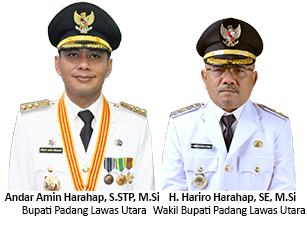
<style>
.page{position:relative;width:307px;height:236px;background:#ffffff}
.page>*{position:absolute;margin:0}
.t1{font:12px "Calibri-Bold";letter-spacing:-0.025em;color:#000000}
.t2{font:12px "Calibri";letter-spacing:-0.025em;color:#000000}
</style>
<div class="page">
<p class="t1" style="left:4px;top:192px;width:156px;height:11px">Andar Amin Harahap, S.STP, M.Si</p>
<p class="t1" style="left:169px;top:192px;width:127px;height:11px">H. Hariro Harahap, SE, M.Si</p>
<p class="t2" style="left:22px;top:206px;width:124px;height:10px">Bupati Padang Lawas Utara</p>
<p class="t2" style="left:153px;top:206px;width:152px;height:10px">Wakil Bupati Padang Lawas Utara</p>
</div>
